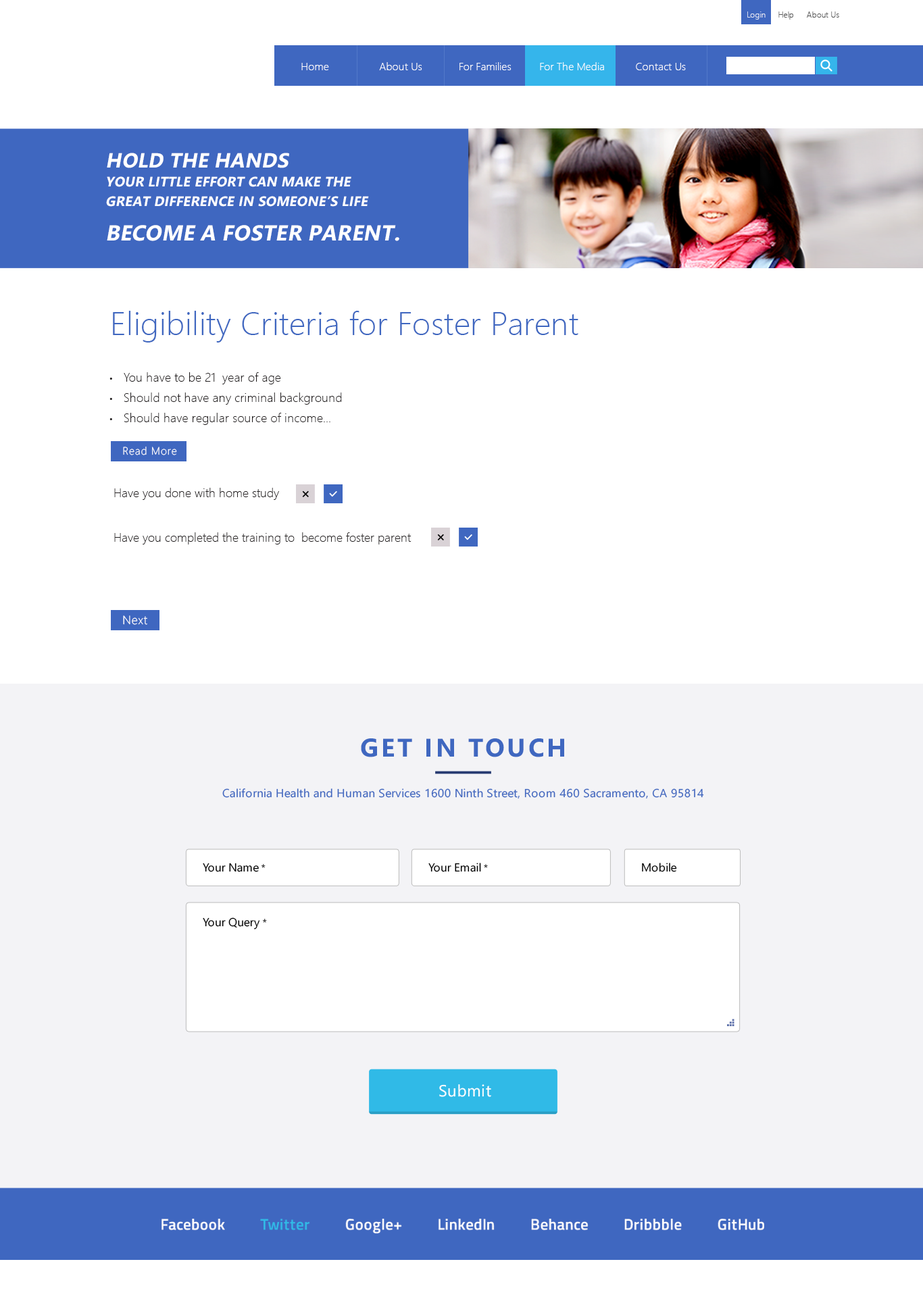
<style>
.page{position:relative;width:923px;height:1293px;background:#ffffff}
.page>*{position:absolute;margin:0}
.t1{font:8.1px "SegoeUI-Light";letter-spacing:0.01em;color:#585858}
.t2{font:10.8px "SegoeUI-Light";letter-spacing:0.01em;color:#ffffff}
.t3{font:13.7px/19.3px "SegoeUI-Bold";letter-spacing:0.01em;color:#ffffff;text-transform:uppercase;font-style:italic}
.t4{font:20.5px "SegoeUI-Bold";letter-spacing:0.01em;color:#ffffff;text-transform:uppercase;font-style:italic}
.t5{font:21.6px/34.1px "SegoeUI-Bold";letter-spacing:0.01em;color:#ffffff;text-transform:uppercase;font-style:italic}
.t6{font:32.4px "SegoeUI-Light";letter-spacing:0.01em;color:#3f67c0}
.t7{font:12.2px/20.3px "SegoeUI-Light";letter-spacing:0.01em;color:#231f20}
.t8{font:8.1px "SegoeUI-Light";letter-spacing:0.01em;color:#231f20}
.t9{font:10.8px "SegoeUI-Light";letter-spacing:0.05em;color:#ffffff}
.t10{font:12.2px "SegoeUI-Light";color:#231f20}
.t11{font:12.2px "SegoeUI-Light";letter-spacing:0.05em;color:#ffffff}
.t12{font:25.7px "SegoeUI-Bold";letter-spacing:0.1em;color:#3f67c0}
.t13{font:11.6px "SegoeUI";letter-spacing:0.02em;color:#3f67c0}
.t14{font:11.6px "SegoeUI";color:#000000}
.t15{font:10.3px "SegoeUI";color:#000000}
.t16{font:16.2px "SegoeUI";letter-spacing:0.02em;color:#ffffff}
.t17{font:15.4px "TitilliumWeb-SemiBold";letter-spacing:0.02em;color:#ffffff}
.t18{font:15.4px "TitilliumWeb-SemiBold";letter-spacing:0.02em;color:#30bae7}
</style>
<div class="page">
<p class="t1" style="left:747px;top:11px;width:92px;height:9px">Login      Help      About Us</p>
<p class="t2" style="left:301px;top:62px;width:384px;height:8px">Home              About Us             For Families          For The Media Contact Us</p>
<p class="t3" style="left:106px;top:153px;width:293px;height:88px"><span class="t4">Hold the hands<br></span>your little effort can make the<br>great difference in someone’s life<br><span class="t5">Become a Foster parent.</span></p>
<p class="t6" style="left:113px;top:311px;width:465px;height:31px">Eligibility Criteria for Foster Parent</p>
<p class="t7" style="left:109px;top:372px;width:233px;height:53px"><span class="t8">•     </span>You have to be 21  year of age<br><span class="t8">•     </span>Should not have any criminal background<br><span class="t8">•     </span>Should have regular source of income…</p>
<p class="t9" style="left:123px;top:446px;width:54px;height:9px">Read More</p>
<p class="t10" style="left:114px;top:488px;width:165px;height:12px">Have you done with home study</p>
<p class="t10" style="left:114px;top:532px;width:297px;height:12px">Have you completed the training to  become foster parent</p>
<p class="t11" style="left:123px;top:615px;width:24px;height:10px">Next</p>
<p class="t12" style="left:361px;top:738px;width:203px;height:19px">GET IN TOUCH</p>
<p class="t13" style="left:222px;top:788px;width:482px;height:11px">California Health and Human Services 1600 Ninth Street, Room 460 Sacramento, CA 95814</p>
<p class="t14" style="left:203px;top:862px;width:62px;height:10px">Your Name<span class="t15"> *</span></p>
<p class="t14" style="left:428px;top:862px;width:60px;height:10px">Your Email<span class="t15"> *</span></p>
<p class="t14" style="left:642px;top:862px;width:35px;height:10px">Mobile</p>
<p class="t14" style="left:203px;top:917px;width:64px;height:12px">Your Query<span class="t15"> *</span></p>
<p class="t16" style="left:439px;top:1084px;width:52px;height:13px">Submit</p>
<p class="t17" style="left:161px;top:1218px;width:603px;height:15px">Facebook          <span class="t18">Twitter</span>          Google+          LinkedIn          Behance          Dribbble          GitHub</p>
</div>
